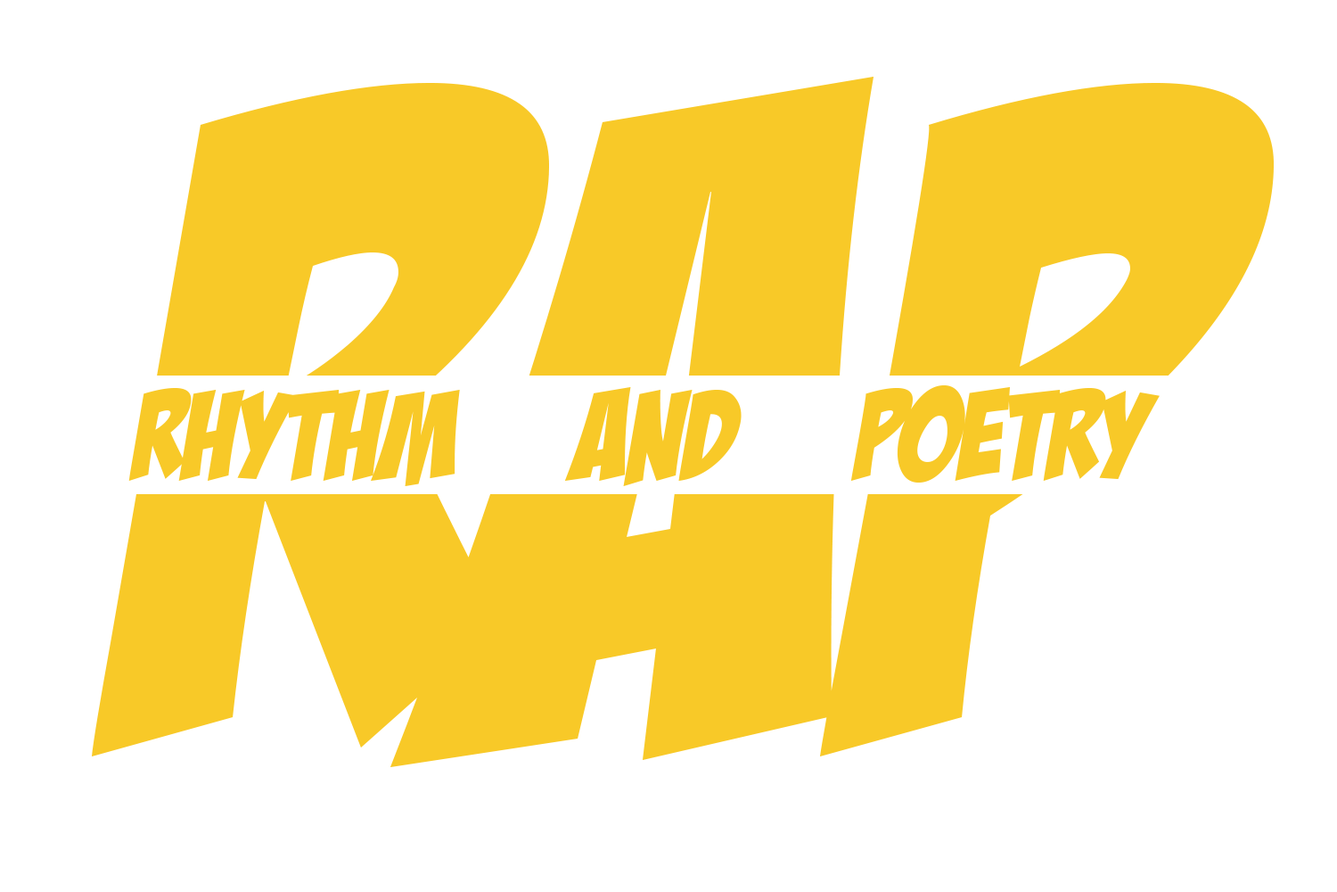
<style>
.page{position:relative;width:1337px;height:892px;background:#ffffff}
.page>*{position:absolute;margin:0}
.t1{font:124.2px "BadaBoomBB";color:#f8c928}
</style>
<div class="page">
<p class="t1" style="left:128px;top:385px;width:1032px;height:101px">Rhythm     and     poetry</p>
</div>
